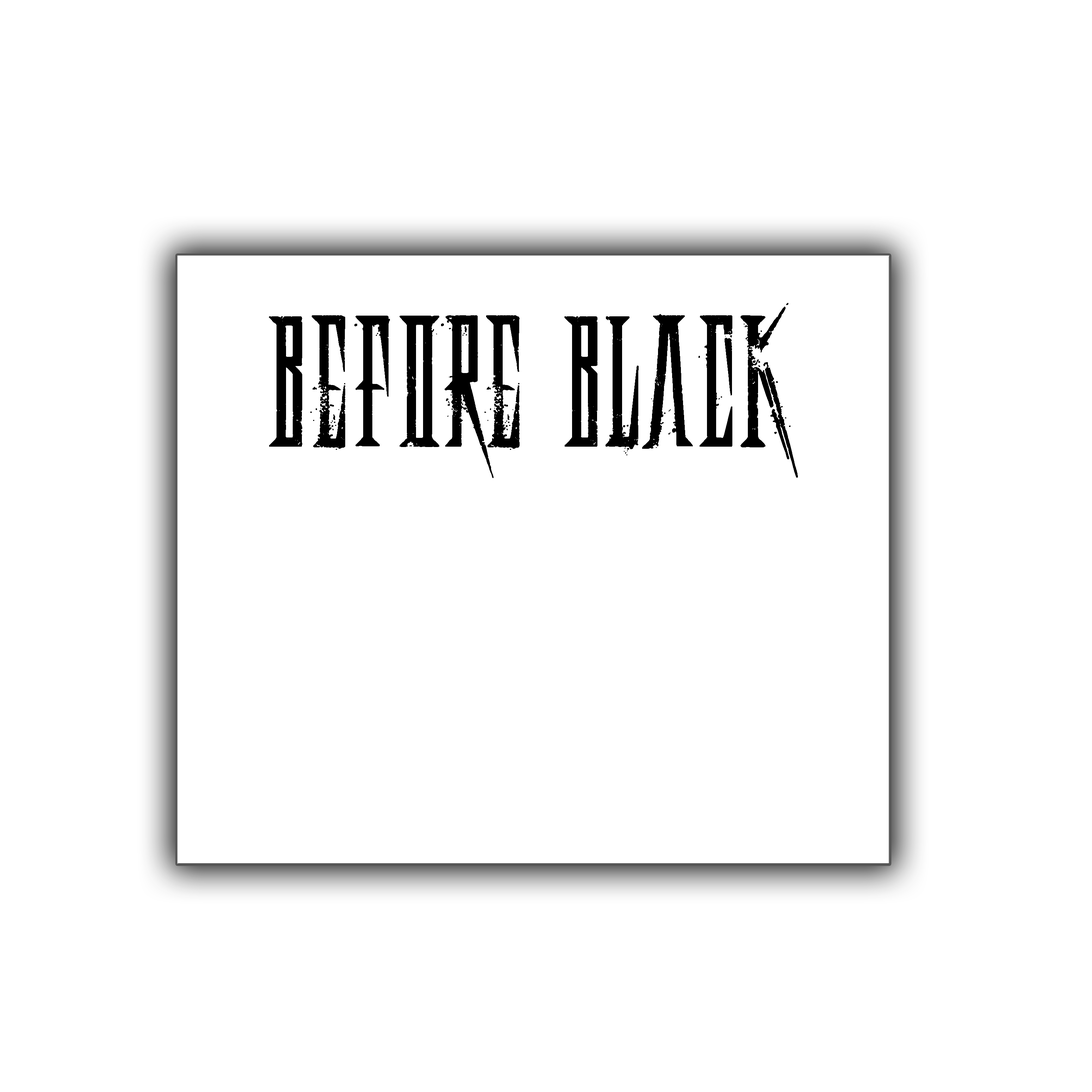
<style>
.page{position:relative;width:1092px;height:1092px;background:#ffffff}
.page>*{position:absolute;margin:0}
.t1{font:172.6px "DeadlyBlackChain";color:#000000}
</style>
<div class="page">
<p class="t1" style="left:269px;top:303px;width:529px;height:175px">before black</p>
</div>
